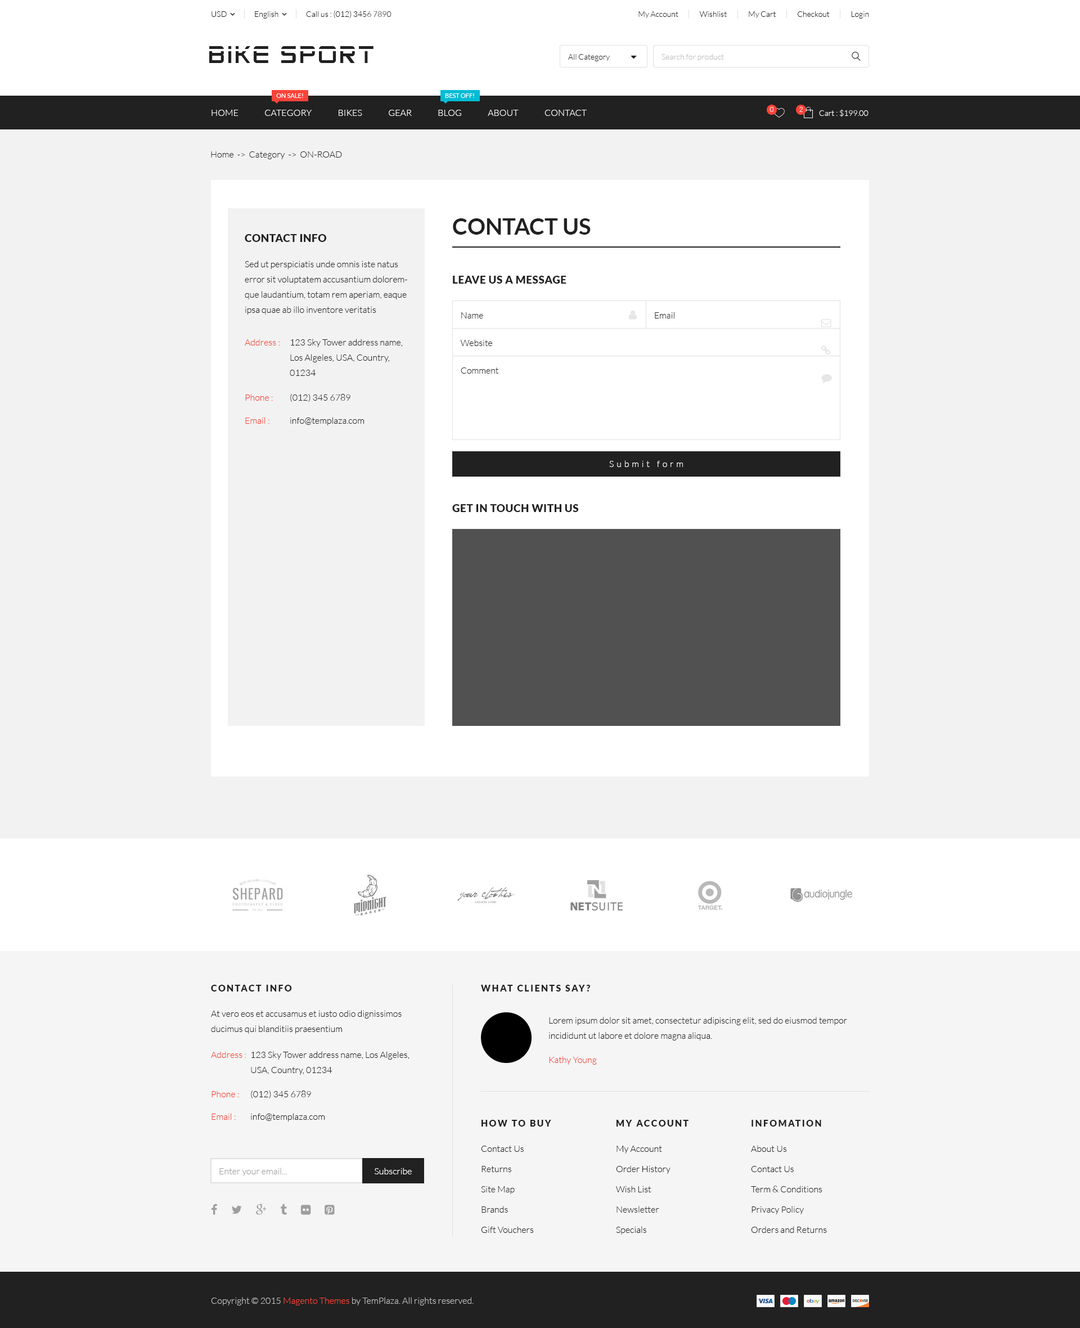
<style>
.page{position:relative;width:1080px;height:1328px;background:#f2f2f2}
.page>*{position:absolute;margin:0}
.t1{font:7.9px "Lato-Light";color:#212121}
.t2{font:24.2px "AdventureSubtitlesNormal";letter-spacing:0.1em;color:#212121;text-transform:uppercase}
.t3{font:24.2px "AdventureSubtitlesNormal";letter-spacing:0.1em;color:#212121}
.t4{font:7.9px "Lato-Light";color:#bdbdbd}
.t5{font:6.2px "Lato-Regular";color:#ffffff;text-transform:uppercase}
.t6{font:9px "Lato-Light";color:#ffffff;text-transform:uppercase}
.t7{font:6.7px "Lato-Light"}
.t8{font:7.9px "Lato-Light";color:#ffffff}
.t9{font:9px "Lato-Light";color:#212121}
.t10{font:22.5px "Lato-Bold";color:#212121;text-transform:uppercase}
.t11{font:10.7px "Lato-Black";letter-spacing:0.03em;color:#212121;text-transform:uppercase}
.t12{font:9px/15.2px "Lato-Light";color:#212121}
.t13{font:9px "Lato-Light";color:#f44336}
.t14{font:9px "Lato-Light";letter-spacing:0.3em;color:#ffffff}
.t15{font:9px "Lato-Black";letter-spacing:0.15em;color:#212121}
.t16{font:9px "Lato-Black";letter-spacing:0.15em;color:#212121;text-transform:uppercase}
.t17{font:9px/20.2px "Lato-Light";color:#212121}
.t18{font:9px "Lato-Light";color:#9e9e9e}
.t19{font:9px "Lato-Light";color:#ffffff}
.t20{font:9px "Lato-Light";color:#bdbdbd}
</style>
<div class="page">
<p class="t1" style="left:212px;top:11px;width:15px;height:6px">USD</p>
<p class="t1" style="left:255px;top:11px;width:23px;height:8px">English</p>
<p class="t1" style="left:306px;top:11px;width:86px;height:7px">Call us : (012) 3456 7890</p>
<p class="t1" style="left:638px;top:11px;width:231px;height:8px">My Account              Wishlist              My Cart              Checkout              Login</p>
<p class="t2" style="left:209px;top:46px;width:165px;height:17px">b<span class="t3">l</span>ke sport</p>
<p class="t1" style="left:568px;top:54px;width:42px;height:7px">All Category</p>
<p class="t4" style="left:662px;top:54px;width:62px;height:7px">Search for product</p>
<p class="t5" style="left:276px;top:93px;width:27px;height:5px">On sale!</p>
<p class="t5" style="left:445px;top:93px;width:29px;height:5px">Best off!</p>
<p class="t6" style="left:212px;top:110px;width:375px;height:6px">Home               category               Bikes               Gear               Blog               About               Contact</p>
<p class="t7" style="left:770px;top:107px;width:4px;height:5px">0</p>
<p class="t7" style="left:799px;top:107px;width:4px;height:5px">2</p>
<p class="t8" style="left:819px;top:109px;width:49px;height:8px">Cart : $199.00</p>
<p class="t9" style="left:211px;top:151px;width:131px;height:8px">Home  -&gt;  Category  -&gt;  ON-ROAD</p>
<p class="t10" style="left:453px;top:218px;width:138px;height:17px">Contact us</p>
<p class="t11" style="left:245px;top:234px;width:81px;height:8px">Contact info</p>
<p class="t12" style="left:245px;top:260px;width:162px;height:54px">Sed ut perspiciatis unde omnis iste natus error sit voluptatem accusantium doloremque laudantium, totam rem aperiam, eaque ipsa quae ab illo inventore veritatis</p>
<p class="t11" style="left:453px;top:276px;width:113px;height:8px">Leave us a message</p>
<p class="t9" style="left:461px;top:312px;width:22px;height:6px">Name</p>
<p class="t9" style="left:655px;top:312px;width:19px;height:6px">Email</p>
<p class="t13" style="left:245px;top:339px;width:35px;height:6px">Address :</p>
<p class="t12" style="left:290px;top:339px;width:113px;height:37px">123 Sky Tower address name, Los Algeles, USA, Country, 01234</p>
<p class="t9" style="left:460px;top:339px;width:32px;height:7px">Website</p>
<p class="t9" style="left:461px;top:367px;width:38px;height:7px">Comment</p>
<p class="t13" style="left:245px;top:394px;width:28px;height:6px">Phone :</p>
<p class="t9" style="left:290px;top:394px;width:60px;height:8px">(012) 345 6789</p>
<p class="t13" style="left:245px;top:417px;width:24px;height:7px">Email :</p>
<p class="t9" style="left:290px;top:417px;width:74px;height:8px">info@templaza.com</p>
<p class="t14" style="left:609px;top:460px;width:74px;height:7px">Submit form</p>
<p class="t11" style="left:452px;top:504px;width:127px;height:8px">Get in touch with us</p>
<p class="t15" style="left:211px;top:984px;width:81px;height:7px">CONTACT INFO</p>
<p class="t16" style="left:481px;top:984px;width:109px;height:7px">What clients say?</p>
<p class="t12" style="left:211px;top:1010px;width:191px;height:23px">At vero eos et accusamus et iusto odio dignissimos ducimus qui blanditiis praesentium</p>
<p class="t12" style="left:549px;top:1016px;width:298px;height:24px">Lorem ipsum dolor sit amet, consectetur adipiscing elit, sed do eiusmod tempor     incididunt ut labore et dolore magna aliqua.</p>
<p class="t13" style="left:211px;top:1051px;width:35px;height:7px">Address :</p>
<p class="t12" style="left:251px;top:1051px;width:159px;height:23px">123 Sky Tower address name, Los Algeles,        USA, Country, 01234</p>
<p class="t13" style="left:549px;top:1056px;width:48px;height:8px">Kathy Young</p>
<p class="t13" style="left:212px;top:1090px;width:27px;height:7px">Phone :</p>
<p class="t9" style="left:251px;top:1090px;width:60px;height:8px">(012) 345 6789</p>
<p class="t13" style="left:212px;top:1113px;width:24px;height:6px">Email :</p>
<p class="t9" style="left:251px;top:1113px;width:74px;height:8px">info@templaza.com</p>
<p class="t15" style="left:482px;top:1119px;width:69px;height:7px">HOW TO BUY</p>
<p class="t15" style="left:616px;top:1119px;width:72px;height:7px">MY ACCOUNT</p>
<p class="t16" style="left:752px;top:1119px;width:69px;height:7px">Infomation</p>
<p class="t17" style="left:481px;top:1145px;width:53px;height:87px">Contact Us<br>Returns<br>Site Map<br>Brands<br>Gift Vouchers</p>
<p class="t17" style="left:616px;top:1145px;width:54px;height:89px">My Account<br>Order History<br>Wish List<br>Newsletter<br>Specials</p>
<p class="t17" style="left:751px;top:1145px;width:76px;height:87px">About Us<br>Contact Us<br>Term &amp; Conditions<br>Privacy Policy<br>Orders and Returns</p>
<p class="t18" style="left:219px;top:1167px;width:68px;height:9px">Enter your email...</p>
<p class="t19" style="left:375px;top:1167px;width:37px;height:7px">Subscribe</p>
<p class="t20" style="left:211px;top:1297px;width:263px;height:8px">Copyright © 2015 <span class="t13">Magento Themes</span> by TemPlaza. All rights reserved.</p>
</div>
